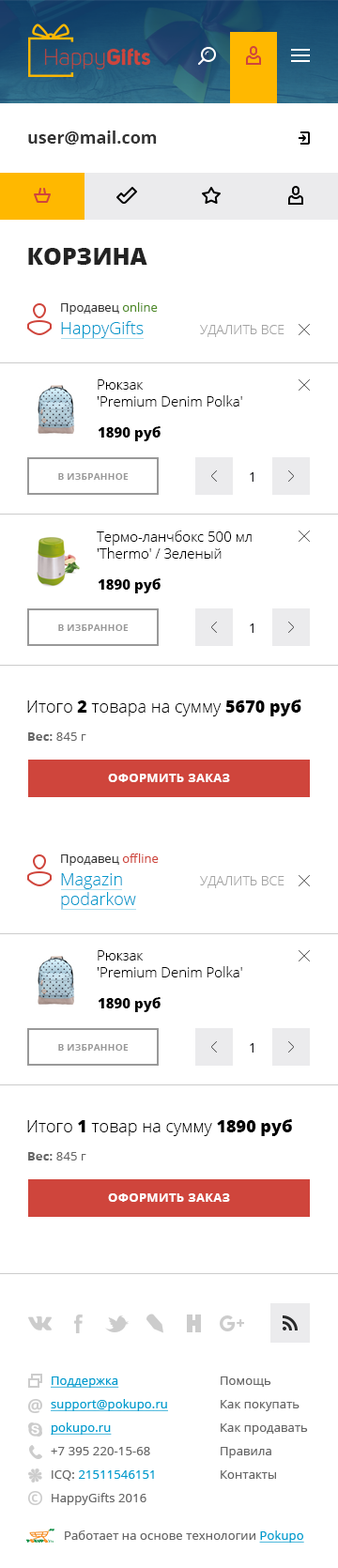
<style>
.page{position:relative;width:338px;height:1568px;background:#ffffff}
.page>*{position:absolute;margin:0}
.t1{font:16.9px "OpenSans-Bold";color:#333333}
.t2{font:23.5px "OpenSans-Extrabold";color:#232323;text-transform:uppercase}
.t3{font:12.2px "OpenSans";color:#333333}
.t4{font:12.2px "OpenSans";color:#4f8b27}
.t5{font:16.9px "OpenSans-Light";color:#0099cc}
.t6{font:13.1px "OpenSans-Light";color:#a3a3a3;text-transform:uppercase}
.t7{font:14.1px/16.9px "OpenSans-Light";color:#000000}
.t8{font:14.1px "OpenSans-Extrabold";color:#000000}
.t9{font:9.4px "OpenSans-Bold";letter-spacing:0.025em;color:#999999;text-transform:uppercase}
.t10{font:13.1px "OpenSans";color:#28282c}
.t11{font:16.9px "OpenSans-Light";color:#000000}
.t12{font:16.9px "OpenSans-Extrabold";color:#000000}
.t13{font:12.2px "OpenSans";letter-spacing:0.01em;color:#666666}
.t14{font:12.2px "OpenSans-Bold";letter-spacing:0.01em;color:#666666}
.t15{font:12.2px "OpenSans-Bold";letter-spacing:0.025em;color:#ffffff;text-transform:uppercase}
.t16{font:12.2px "OpenSans";color:#cf453c}
.t17{font:16.9px/19.7px "OpenSans-Light";color:#0099cc}
</style>
<div class="page">
<p class="t1" style="left:28px;top:131px;width:129px;height:14px">user@mail.com</p>
<p class="t2" style="left:28px;top:248px;width:119px;height:17px">Корзина</p>
<p class="t3" style="left:61px;top:302px;width:97px;height:13px">Продавец <span class="t4">online</span></p>
<p class="t5" style="left:61px;top:321px;width:83px;height:17px">HappyGifts</p>
<p class="t6" style="left:200px;top:325px;width:84px;height:12px">Удалить все</p>
<p class="t7" style="left:97px;top:379px;width:145px;height:28px">Рюкзак<br>'Premium Denim Polka'</p>
<p class="t8" style="left:98px;top:426px;width:63px;height:15px">1890 руб</p>
<p class="t9" style="left:58px;top:473px;width:71px;height:7px">в избранное</p>
<p class="t10" style="left:250px;top:472px;width:4px;height:10px">1</p>
<p class="t7" style="left:97px;top:530px;width:155px;height:29px">Термо-ланчбокс 500 мл<br>'Thermo' / Зеленый</p>
<p class="t8" style="left:98px;top:578px;width:63px;height:15px">1890 руб</p>
<p class="t9" style="left:58px;top:624px;width:71px;height:7px">в избранное</p>
<p class="t10" style="left:250px;top:623px;width:4px;height:10px">1</p>
<p class="t11" style="left:27px;top:699px;width:274px;height:17px">Итого <span class="t12">2</span> товара на сумму <span class="t12">5670 руб</span></p>
<p class="t13" style="left:28px;top:732px;width:58px;height:9px"><span class="t14">Вес:</span> 845 г</p>
<p class="t15" style="left:108px;top:774px;width:122px;height:8px">Оформить заказ</p>
<p class="t3" style="left:61px;top:853px;width:98px;height:13px">Продавец <span class="t16">offline</span></p>
<p class="t17" style="left:61px;top:873px;width:75px;height:36px">Magazin<br>podarkow</p>
<p class="t6" style="left:200px;top:876px;width:84px;height:12px">Удалить все</p>
<p class="t7" style="left:97px;top:950px;width:145px;height:27px">Рюкзак<br>'Premium Denim Polka'</p>
<p class="t8" style="left:98px;top:997px;width:63px;height:15px">1890 руб</p>
<p class="t9" style="left:58px;top:1044px;width:71px;height:7px">в избранное</p>
<p class="t10" style="left:250px;top:1043px;width:4px;height:10px">1</p>
<p class="t11" style="left:27px;top:1119px;width:265px;height:17px">Итого <span class="t12">1</span> товар на сумму <span class="t12">1890 руб</span></p>
<p class="t13" style="left:28px;top:1152px;width:58px;height:9px"><span class="t14">Вес:</span> 845 г</p>
<p class="t15" style="left:108px;top:1193px;width:122px;height:9px">Оформить заказ</p>
</div>
